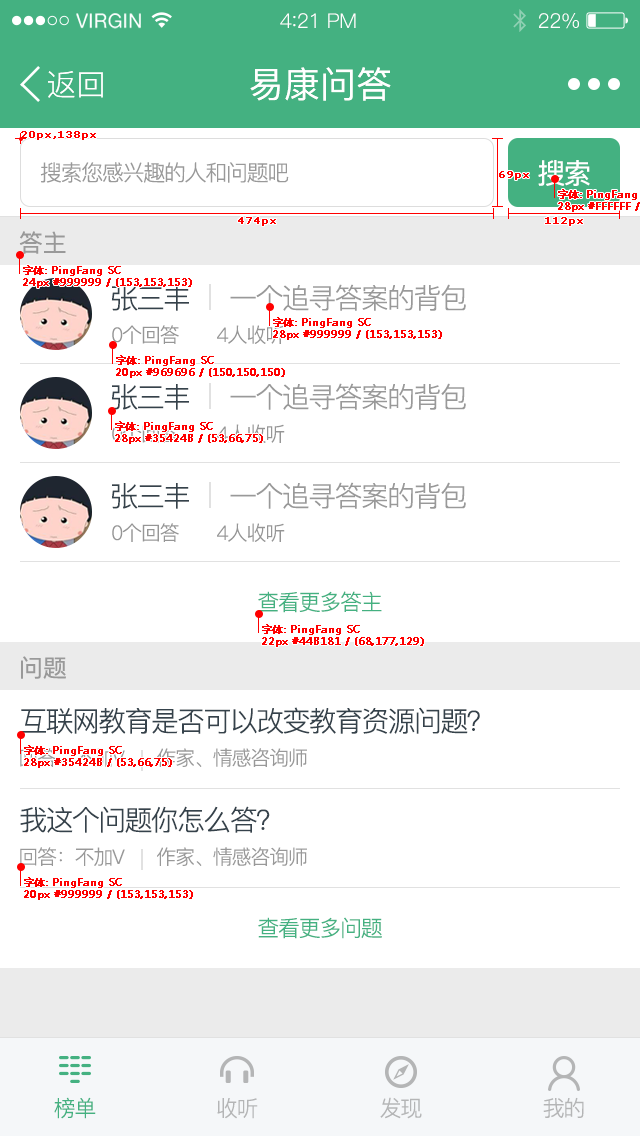
<style>
.page{position:relative;width:640px;height:1136px;background:#ffffff}
.page>*{position:absolute;margin:0}
.t1{font:19.6px "HelveticaNeue";letter-spacing:0.02em;color:#ffffff}
.t2{font:20.4px "PingFang-SC-Regular";letter-spacing:-0.02em;color:#ffffff}
.t3{font:22.1px "PingFang-SC-Regular";letter-spacing:-0.02em;color:#ffffff}
.t4{font:30px "PingFang-SC-Regular";color:#ffffff}
.t5{font:36px "PingFang-SC-Medium";color:#ffffff}
.t6{font:10px "Verdana";color:#ff0000;font-weight:bold}
.t7{font:28px "PingFang-SC-Medium";letter-spacing:-0.06em;color:#ffffff}
.t8{font:22px "PingFang-SC-Regular";letter-spacing:-0.06em;color:#999999}
.t9{font:24px "PingFang-SC-Medium";color:#999999}
.t10{font:10px "MicrosoftYaHei";color:#ff0000;font-weight:bold}
.t11{font:28px "PingFang-SC-Regular";letter-spacing:-0.06em;color:#35424b}
.t12{font:28px "PingFang-SC-Regular";letter-spacing:-0.06em;color:#999999}
.t13{font:20px "PingFang-SC-Regular";letter-spacing:-0.06em;color:#969696}
.t14{font:20px "PingFang-SC-Regular";letter-spacing:-0.06em}
.t15{font:22px "PingFang-SC-Regular";letter-spacing:-0.06em;color:#44b181}
.t16{font:20px "PingFang-SC-Regular";letter-spacing:-0.06em;color:#999999}
.t17{font:22px "PingFang-SC-Regular";letter-spacing:-0.06em;color:#b4b5b6}
</style>
<div class="page">
<p class="t1" style="left:76px;top:13px;width:65px;height:16px">VIRGIN</p>
<p class="t2" style="left:280px;top:13px;width:76px;height:15px">4<span class="t3">:</span>21 PM</p>
<p class="t2" style="left:539px;top:13px;width:40px;height:16px">22%</p>
<p class="t4" style="left:48px;top:71px;width:55px;height:27px">返回</p>
<p class="t5" style="left:250px;top:67px;width:141px;height:34px">易康问答</p>
<p class="t6" style="left:21px;top:131px;width:75px;height:9px">20px,138px</p>
<p class="t7" style="left:538px;top:160px;width:52px;height:26px">搜索</p>
<p class="t8" style="left:40px;top:162px;width:249px;height:21px">搜索您感兴趣的人和问题吧</p>
<p class="t6" style="left:499px;top:171px;width:30px;height:9px">69px</p>
<p class="t6" style="left:238px;top:217px;width:38px;height:9px">474px</p>
<p class="t6" style="left:545px;top:217px;width:38px;height:9px">112px</p>
<p class="t9" style="left:19px;top:231px;width:47px;height:23px">答主</p>
<p class="t10" style="left:23px;top:265px;width:169px;height:23px">字体: PingFang SC<br>24px #999999 / (153,153,153)</p>
<p class="t11" style="left:111px;top:285px;width:78px;height:26px">张三丰</p>
<p class="t12" style="left:230px;top:284px;width:236px;height:27px">一个追寻答案的背包</p>
<p class="t10" style="left:273px;top:317px;width:169px;height:23px">字体: PingFang SC<br>28px #999999 / (153,153,153)</p>
<p class="t13" style="left:112px;top:325px;width:173px;height:19px">0个回答       4人收听</p>
<p class="t10" style="left:116px;top:355px;width:169px;height:23px">字体: PingFang SC<br>20px #969696 / (150,150,150)</p>
<p class="t11" style="left:111px;top:384px;width:78px;height:26px">张三丰</p>
<p class="t12" style="left:230px;top:383px;width:236px;height:27px">一个追寻答案的背包</p>
<p class="t14" style="left:112px;top:424px;width:173px;height:19px">0个回答       4人收听</p>
<p class="t10" style="left:115px;top:421px;width:148px;height:23px">字体: PingFang SC<br>28px #35424B / (53,66,75)</p>
<p class="t11" style="left:111px;top:483px;width:78px;height:26px">张三丰</p>
<p class="t12" style="left:230px;top:482px;width:236px;height:27px">一个追寻答案的背包</p>
<p class="t13" style="left:112px;top:523px;width:173px;height:19px">0个回答       4人收听</p>
<p class="t15" style="left:258px;top:591px;width:124px;height:22px">查看更多答主</p>
<p class="t10" style="left:262px;top:624px;width:162px;height:23px">字体: PingFang SC<br>22px #44B181 / (68,177,129)</p>
<p class="t9" style="left:21px;top:656px;width:45px;height:23px">问题</p>
<p class="t11" style="left:20px;top:707px;width:460px;height:27px">互联网教育是否可以改变教育资源问题？</p>
<p class="t16" style="left:20px;top:748px;width:287px;height:19px">回答：不加V      作家、情感咨询师</p>
<p class="t10" style="left:24px;top:745px;width:148px;height:23px">字体: PingFang SC<br>28px #35424B / (53,66,75)</p>
<p class="t11" style="left:20px;top:806px;width:250px;height:27px">我这个问题你怎么答？</p>
<p class="t16" style="left:20px;top:847px;width:287px;height:19px">回答：不加V      作家、情感咨询师</p>
<p class="t10" style="left:24px;top:877px;width:169px;height:23px">字体: PingFang SC<br>20px #999999 / (153,153,153)</p>
<p class="t15" style="left:258px;top:917px;width:124px;height:22px">查看更多问题</p>
<p class="t15" style="left:54px;top:1097px;width:42px;height:22px">榜单</p>
<p class="t17" style="left:380px;top:1097px;width:42px;height:22px">发现</p>
<p class="t17" style="left:543px;top:1097px;width:41px;height:21px">我的</p>
<p class="t17" style="left:217px;top:1098px;width:41px;height:21px">收听</p>
</div>
